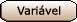
<style>
.page{position:relative;width:77px;height:22px}
.page>*{position:absolute;margin:0}
.t1{font:11px "Verdana";color:#000000}
</style>
<div class="page">
<p class="t1" style="left:17px;top:5px;width:44px;height:10px">Variável</p>
</div>
